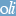
<style>
.page{position:relative;width:16px;height:16px;background:#6ca2c8}
.page>*{position:absolute;margin:0}
.t1{font:18px "Times-Roman";letter-spacing:0.025em;color:#ffffff}
.t2{font:18px "Times-Italic";letter-spacing:0.025em;color:#ffffff}
</style>
<div class="page">
<p class="t1" style="left:0px;top:6px;width:9px;height:8px">o</p>
<p class="t2" style="left:8px;top:1px;width:5px;height:13px">l</p>
<p class="t2" style="left:11px;top:2px;width:5px;height:12px">i</p>
</div>
